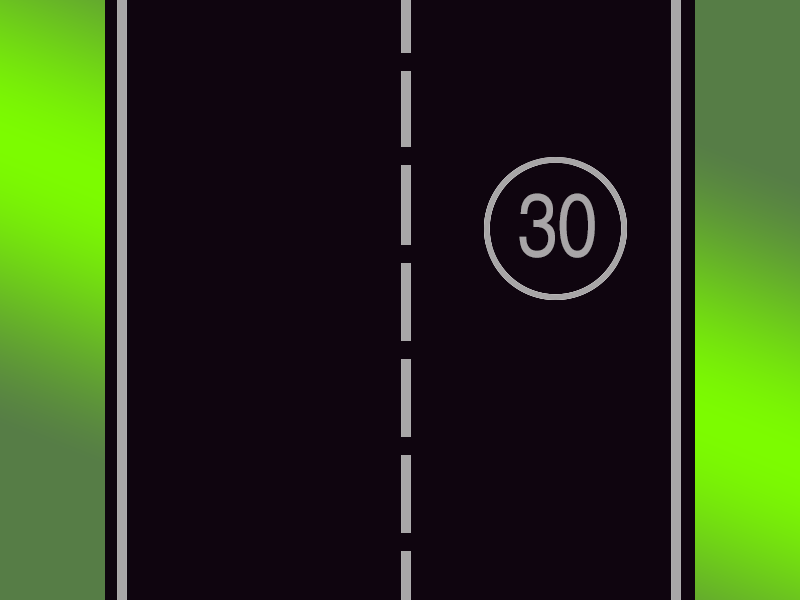
<style>
.page{position:relative;width:800px;height:600px;background:#0f050f}
.page>*{position:absolute;margin:0}
.t1{font:89px "NimbusSanL-ReguCond";color:#a8a6a7}
</style>
<div class="page">
<p class="t1" style="left:519px;top:193px;width:76px;height:65px">30</p>
</div>
